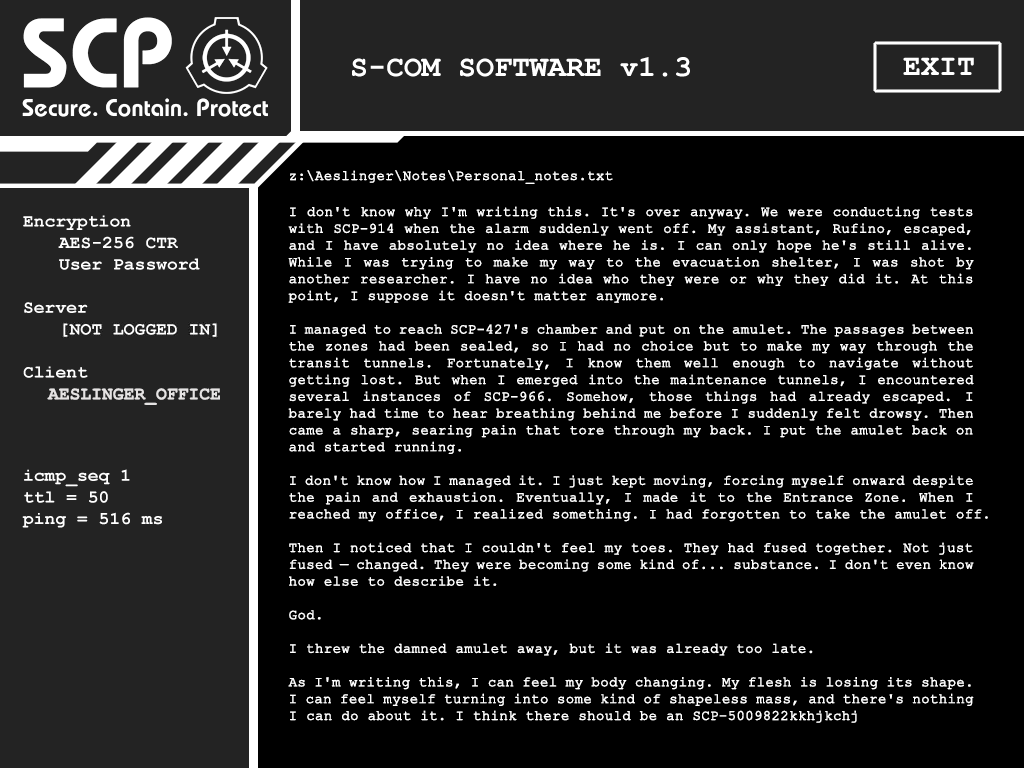
<style>
.page{position:relative;width:1024px;height:768px;background:#000000}
.page>*{position:absolute;margin:0}
.t1{font:14px "CourierNewPSMT";color:#ffffff;font-weight:bold}
.t2{font:18px "CourierNewPS-BoldMT";color:#e5e3e3}
</style>
<div class="page">
<p class="t1" style="left:288px;top:170px;width:700px;height:553px;text-align:justify">z:\Aeslinger\Notes\Personal_notes.txt<br><br>I don't know why I'm writing this. It's over anyway. We were conducting tests with SCP-914 when the alarm suddenly went off. My assistant, Rufino, escaped, and I have absolutely no idea where he is. I can only hope he's still alive. While I was trying to make my way to the evacuation shelter, I was shot by another researcher. I have no idea who they were or why they did it. At this point, I suppose it doesn't matter anymore.<br><br>I managed to reach SCP-427's chamber and put on the amulet. The passages between the zones had been sealed, so I had no choice but to make my way through the transit tunnels. Fortunately, I know them well enough to navigate without getting lost. But when I emerged into the maintenance tunnels, I encountered several instances of SCP-966. Somehow, those things had already escaped. I barely had time to hear breathing behind me before I suddenly felt drowsy. Then came a sharp, searing pain that tore through my back. I put the amulet back on and started running.<br><br>I don't know how I managed it. I just kept moving, forcing myself onward despite the pain and exhaustion. Eventually, I made it to the Entrance Zone. When I reached my office, I realized something. I had forgotten to take the amulet off.<br><br>Then I noticed that I couldn't feel my toes. They had fused together. Not just fused — changed. They were becoming some kind of... substance. I don't even know how else to describe it.<br><br>God.<br><br>I threw the damned amulet away, but it was already too late.<br><br>As I'm writing this, I can feel my body changing. My flesh is losing its shape. I can feel myself turning into some kind of shapeless mass, and there's nothing I can do about it. I think there should be an SCP-5009822kkhjkchj</p>
<p class="t2" style="left:47px;top:388px;width:173px;height:17px">AESLINGER_OFFICE</p>
</div>
